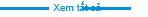
<style>
.page{position:relative;width:148px;height:17px;background:#ffffff}
.page>*{position:absolute;margin:0}
.t1{font:10px "ArialMT";color:#0d8ccf}
</style>
<div class="page">
<p class="t1" style="left:53px;top:1px;width:48px;height:10px">Xem tất cả</p>
</div>
